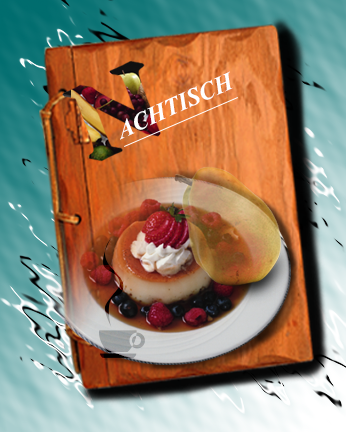
<style>
.page{position:relative;width:346px;height:432px}
.page>*{position:absolute;margin:0}
.t1{font:24.4px "TimesNewRomanPS-BoldItalicMT";color:#ffffff}
</style>
<div class="page">
<p class="t1" style="left:120px;top:71px;width:113px;height:69px;rotate:-24deg">ACHTISCH</p>
</div>
